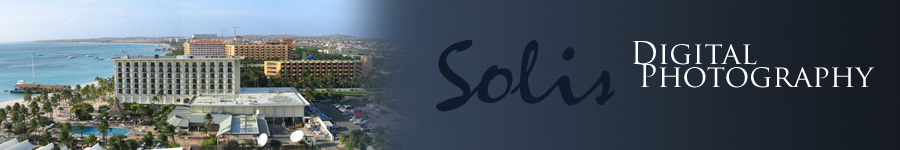
<style>
.page{position:relative;width:900px;height:150px}
.page>*{position:absolute;margin:0}
.t1{font:83.3px "Zephyr";color:#0f1b2b}
.t2{font:30.6px "TrajanPro-Regular";color:#ffffff}
</style>
<div class="page">
<p class="t1" style="left:436px;top:39px;width:179px;height:73px">Solis</p>
<p class="t2" style="left:632px;top:41px;width:125px;height:24px">Digital</p>
<p class="t2" style="left:640px;top:64px;width:235px;height:24px">Photography</p>
</div>
